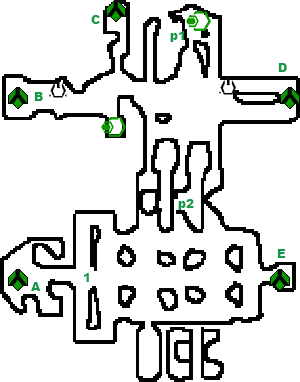
<style>
.page{position:relative;width:300px;height:382px;background:#ffffff}
.page>*{position:absolute;margin:0}
.t1{font:12px "Arial-Black";color:#159847}
</style>
<div class="page">
<p class="t1" style="left:91px;top:15px;width:9px;height:9px">C</p>
<p class="t1" style="left:170px;top:31px;width:14px;height:11px">p1</p>
<p class="t1" style="left:278px;top:63px;width:9px;height:9px">D</p>
<p class="t1" style="left:34px;top:92px;width:9px;height:9px">B</p>
<p class="t1" style="left:178px;top:199px;width:16px;height:11px">p2</p>
<p class="t1" style="left:277px;top:249px;width:9px;height:9px">E</p>
<p class="t1" style="left:84px;top:273px;width:5px;height:9px">1</p>
<p class="t1" style="left:31px;top:282px;width:10px;height:9px">A</p>
</div>
